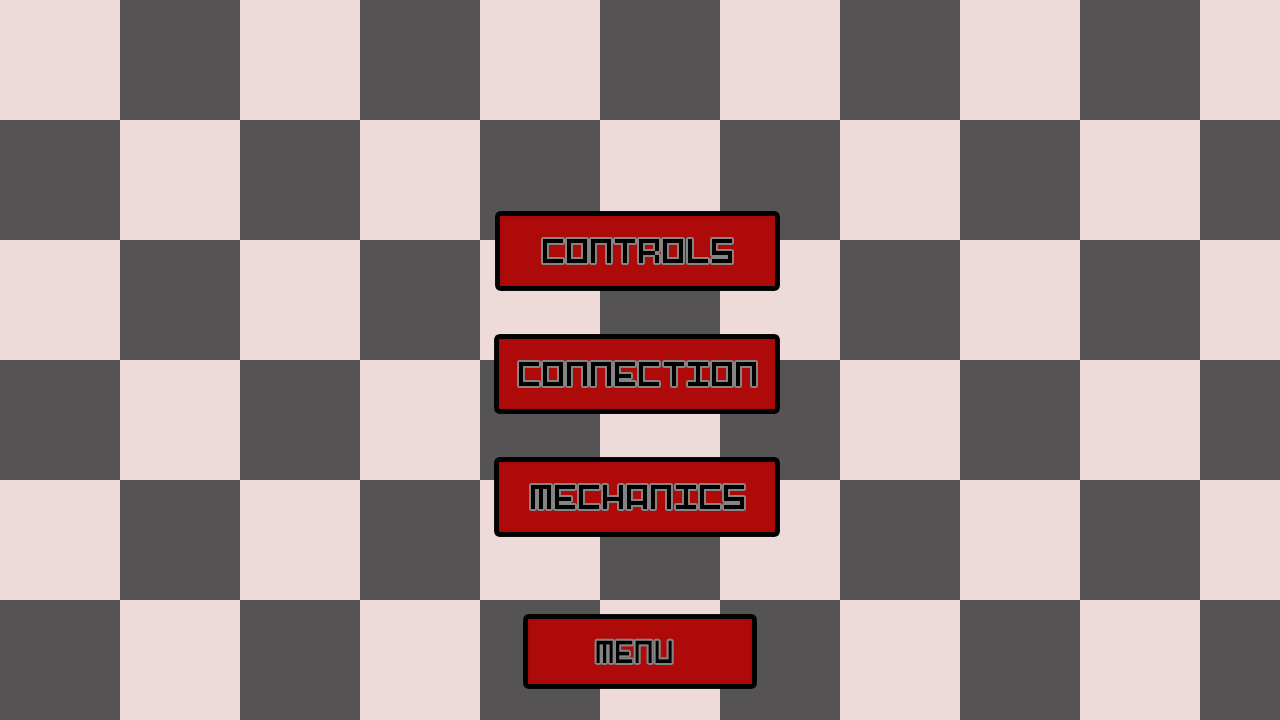
<style>
.page{position:relative;width:1280px;height:720px;background:#555353}
.page>*{position:absolute;margin:0}
.t1{font:32px "Pixel-Art";color:#000000}
.t2{font:29.7px "Pixel-Art";color:#000000;scale:0.88 1}
</style>
<div class="page">
<p class="t1" style="left:543px;top:239px;width:189px;height:24px">CONTROLS</p>
<p class="t1" style="left:519px;top:362px;width:237px;height:24px">CONNECTION</p>
<p class="t1" style="left:531px;top:485px;width:213px;height:24px">MECHANICS</p>
<p class="t2" style="left:596px;top:640px;width:76px;height:23px">MENU</p>
</div>
